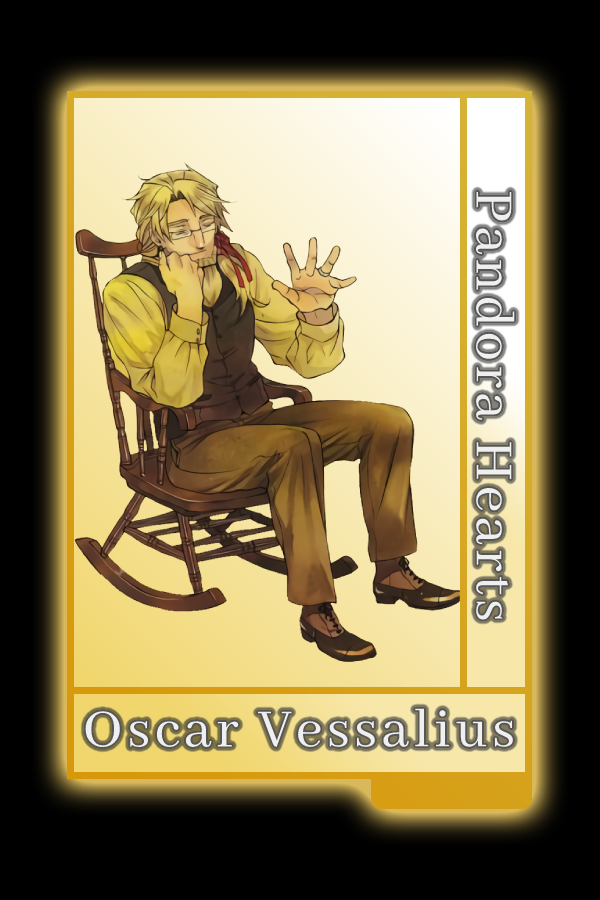
<style>
.page{position:relative;width:600px;height:900px;background:#000000}
.page>*{position:absolute;margin:0}
.t1{font:59.1px "AbhayaLibre-Regular";letter-spacing:0.072em;color:#efefef}
.t2{font:59px "AbhayaLibre-Regular";letter-spacing:0.072em;color:#efefef}
</style>
<div class="page">
<p class="t1" style="left:476px;top:192px;width:39px;height:428px;rotate:90deg">Pandora Hearts</p>
<p class="t2" style="left:85px;top:708px;width:428px;height:40px">Oscar Vessalius</p>
</div>
